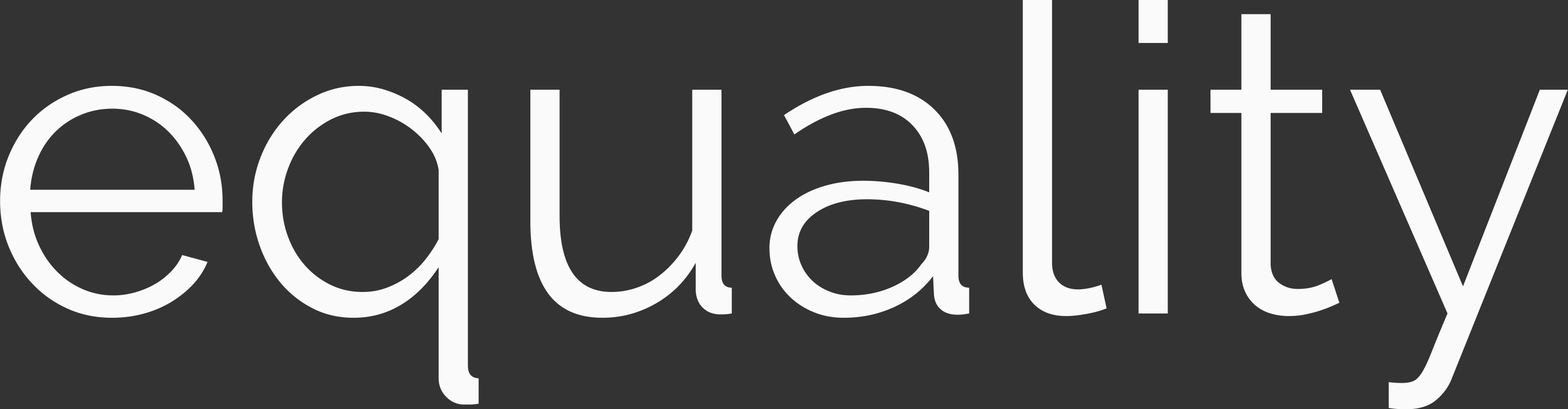
<style>
.page{position:relative;width:1568px;height:409px;background:#333333}
.page>*{position:absolute;margin:0}
.t1{font:429.4px "Raleway-Regular";color:#fafafa}
</style>
<div class="page">
<p class="t1" style="left:0px;top:0px;width:1568px;height:410px">equality</p>
</div>
